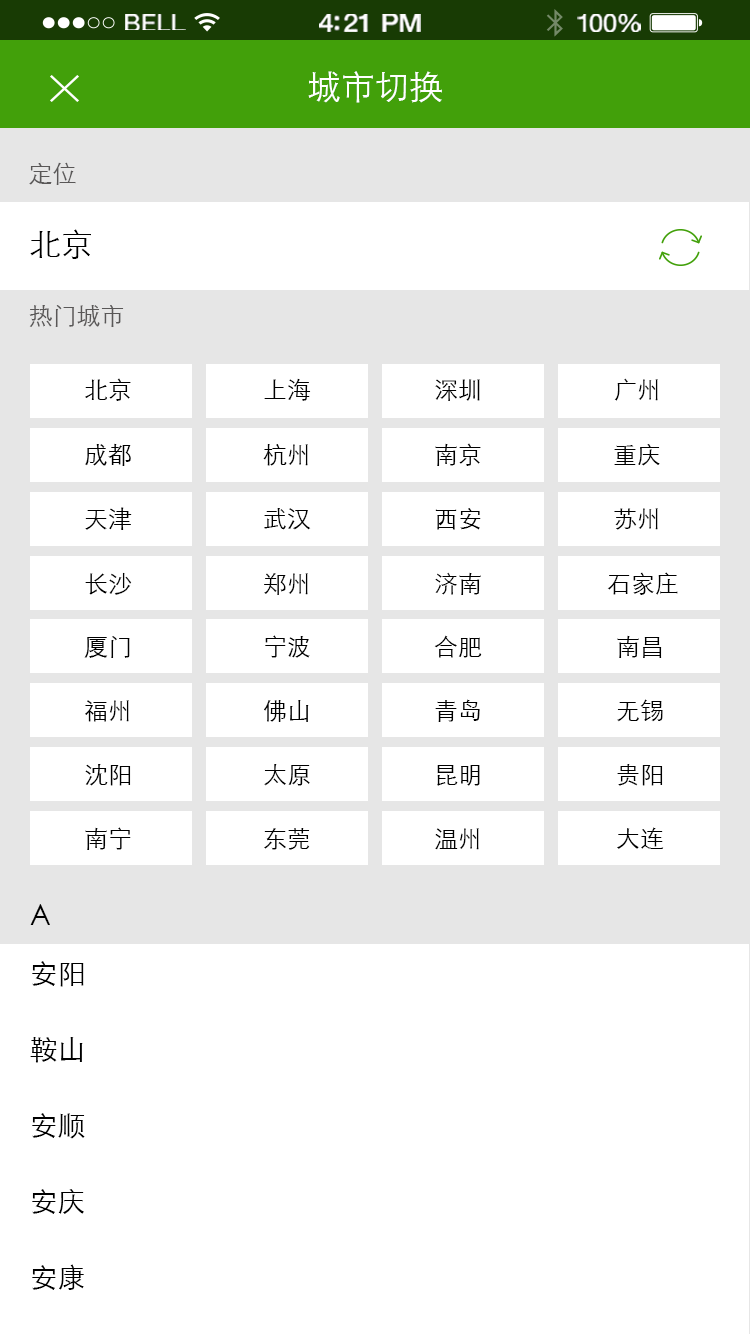
<style>
.page{position:relative;width:750px;height:1334px;background:#ffffff}
.page>*{position:absolute;margin:0}
.t1{font:23.3px "HelveticaNeue";letter-spacing:0.02em;color:#ffffff;scale:1.06 1}
.t2{font:25.3px "HelveticaNeue-Medium";letter-spacing:-0.02em;color:#ffffff;scale:1.06 1}
.t3{font:24.3px "HelveticaNeue";letter-spacing:-0.02em;color:#ffffff;scale:1.06 1}
.t4{font:34px "STXihei";color:#ffffff}
.t5{font:24px "STXihei";color:#595757}
.t6{font:32px "STXihei";color:#000000}
.t7{font:24px "STXihei";color:#000000}
.t8{font:28px "STXihei";color:#000000}
.t9{font:28px/76px "STXihei";color:#000000}
</style>
<div class="page">
<p class="t1" style="left:125px;top:14px;width:61px;height:16px">BELL</p>
<p class="t2" style="left:319px;top:14px;width:102px;height:18px">4:21 PM</p>
<p class="t3" style="left:577px;top:14px;width:64px;height:18px">100%</p>
<p class="t4" style="left:308px;top:71px;width:134px;height:32px">城市切换</p>
<p class="t5" style="left:29px;top:162px;width:47px;height:23px">定位</p>
<p class="t6" style="left:30px;top:229px;width:61px;height:30px">北京</p>
<p class="t5" style="left:29px;top:305px;width:95px;height:22px">热门城市</p>
<p class="t7" style="left:85px;top:378px;width:46px;height:23px">北京</p>
<p class="t7" style="left:264px;top:378px;width:47px;height:23px">上海</p>
<p class="t7" style="left:435px;top:379px;width:45px;height:22px">深圳</p>
<p class="t7" style="left:614px;top:378px;width:44px;height:23px">广州</p>
<p class="t7" style="left:85px;top:443px;width:46px;height:23px">成都</p>
<p class="t7" style="left:263px;top:444px;width:45px;height:22px">杭州</p>
<p class="t7" style="left:435px;top:443px;width:46px;height:23px">南京</p>
<p class="t7" style="left:614px;top:444px;width:46px;height:22px">重庆</p>
<p class="t7" style="left:85px;top:507px;width:47px;height:23px">天津</p>
<p class="t7" style="left:264px;top:508px;width:47px;height:22px">武汉</p>
<p class="t7" style="left:435px;top:508px;width:46px;height:22px">西安</p>
<p class="t7" style="left:614px;top:508px;width:44px;height:22px">苏州</p>
<p class="t7" style="left:85px;top:572px;width:47px;height:23px">长沙</p>
<p class="t7" style="left:264px;top:573px;width:44px;height:22px">郑州</p>
<p class="t7" style="left:435px;top:572px;width:46px;height:23px">济南</p>
<p class="t7" style="left:607px;top:572px;width:71px;height:23px">石家庄</p>
<p class="t7" style="left:84px;top:636px;width:46px;height:22px">厦门</p>
<p class="t7" style="left:265px;top:635px;width:45px;height:23px">宁波</p>
<p class="t7" style="left:434px;top:635px;width:48px;height:23px">合肥</p>
<p class="t7" style="left:617px;top:635px;width:45px;height:23px">南昌</p>
<p class="t7" style="left:85px;top:700px;width:44px;height:22px">福州</p>
<p class="t7" style="left:264px;top:700px;width:45px;height:22px">佛山</p>
<p class="t7" style="left:435px;top:699px;width:45px;height:23px">青岛</p>
<p class="t7" style="left:617px;top:699px;width:46px;height:23px">无锡</p>
<p class="t7" style="left:85px;top:764px;width:46px;height:22px">沈阳</p>
<p class="t7" style="left:264px;top:764px;width:46px;height:22px">太原</p>
<p class="t7" style="left:437px;top:765px;width:43px;height:21px">昆明</p>
<p class="t7" style="left:617px;top:764px;width:46px;height:22px">贵阳</p>
<p class="t7" style="left:85px;top:827px;width:46px;height:23px">南宁</p>
<p class="t7" style="left:264px;top:828px;width:46px;height:22px">东莞</p>
<p class="t7" style="left:435px;top:828px;width:44px;height:22px">温州</p>
<p class="t7" style="left:617px;top:827px;width:47px;height:22px">大连</p>
<p class="t8" style="left:30px;top:904px;width:20px;height:21px">A</p>
<p class="t9" style="left:30px;top:961px;width:55px;height:329px">安阳<br>鞍山<br>安顺<br>安庆<br>安康</p>
</div>
